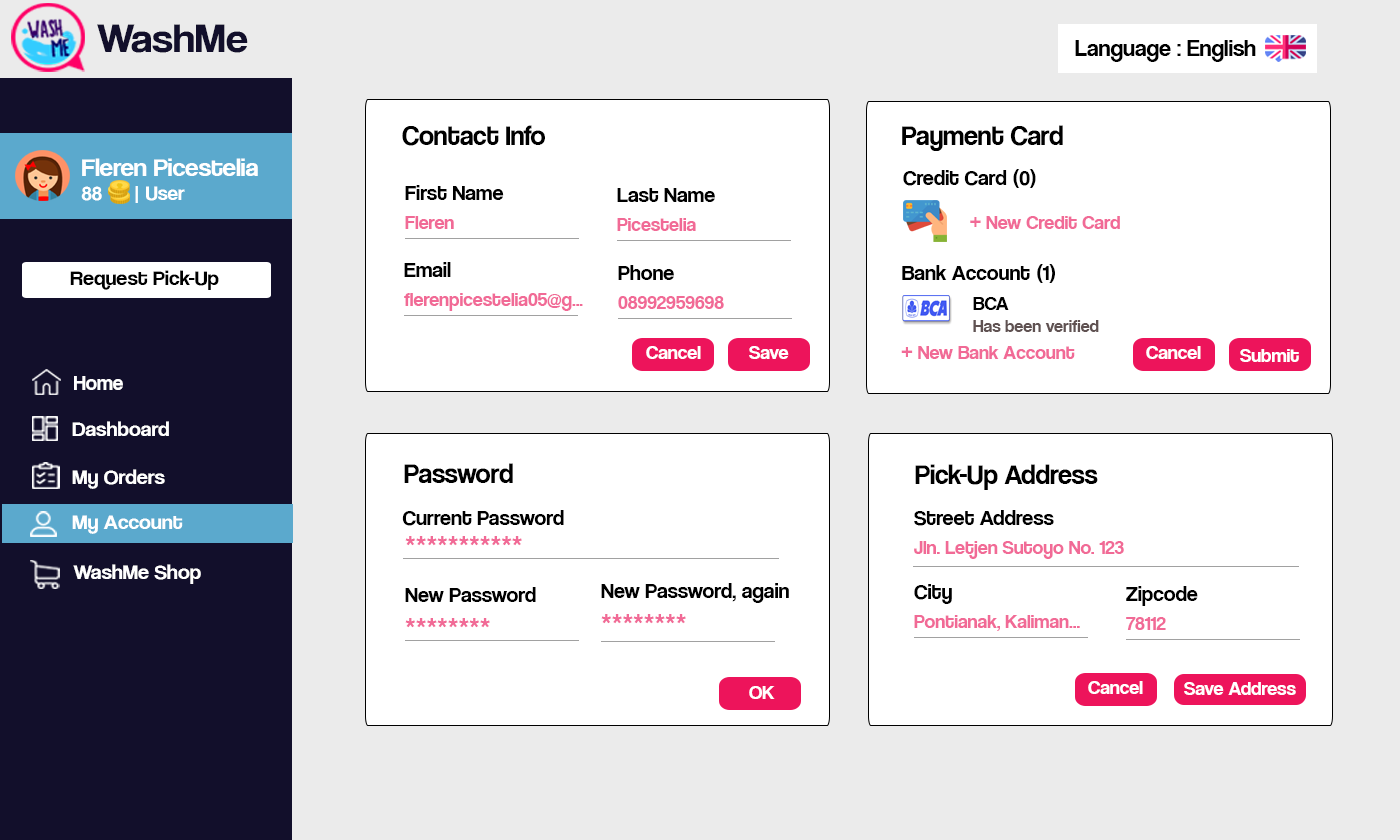
<style>
.page{position:relative;width:1400px;height:840px;background:#ffffff}
.page>*{position:absolute;margin:0}
.t1{font:42.1px "CoolveticaRg-Regular";color:#120f2b;scale:1.05 1}
.t2{font:24px "CoolveticaRg-Regular";color:#000000}
.t3{font:28.6px "CoolveticaRg-Regular";color:#000000;scale:0.97 1}
.t4{font:25.2px "CoolveticaRg-Regular";color:#ffffff;scale:1.05 1}
.t5{font:20px "CoolveticaRg-Regular";color:#ffffff;scale:1.05 1}
.t6{font:22px "CoolveticaRg-Regular";color:#000000}
.t7{font:20px "CoolveticaRg-Regular";color:#f16a96}
.t8{font:22px "CoolveticaRg-Regular";color:#f16a96}
.t9{font:21px "CoolveticaRg-Regular";color:#000000;scale:1.05 1}
.t10{font:18px "CoolveticaRg-Regular";color:#605252}
.t11{font:20px "CoolveticaRg-Regular";color:#000000}
.t12{font:20px "CoolveticaRg-Regular";color:#ffffff}
.t13{font:21px "CoolveticaRg-Regular";color:#ffffff}
.t14{font:21px "CoolveticaRg-Regular";color:#ffffff;scale:1.05 1}
</style>
<div class="page">
<p class="t1" style="left:97px;top:24px;width:151px;height:29px">WashMe</p>
<p class="t2" style="left:1075px;top:40px;width:181px;height:22px">Language : English</p>
<p class="t3" style="left:402px;top:125px;width:143px;height:21px">Contact Info</p>
<p class="t3" style="left:902px;top:125px;width:161px;height:26px">Payment Card</p>
<p class="t4" style="left:81px;top:158px;width:177px;height:45px">Fleren Picestelia<br><span class="t5">88      | User</span></p>
<p class="t6" style="left:903px;top:169px;width:133px;height:19px">Credit Card (0)</p>
<p class="t6" style="left:405px;top:185px;width:99px;height:15px">First Name</p>
<p class="t6" style="left:617px;top:188px;width:98px;height:14px">Last Name</p>
<p class="t7" style="left:405px;top:216px;width:49px;height:13px">Fleren</p>
<p class="t7" style="left:617px;top:218px;width:79px;height:13px">Picestelia</p>
<p class="t7" style="left:970px;top:216px;width:150px;height:13px"><span class="t8">+</span> New Credit Card</p>
<p class="t9" style="left:70px;top:270px;width:149px;height:20px">Request Pick-Up</p>
<p class="t6" style="left:404px;top:262px;width:47px;height:15px">Email</p>
<p class="t6" style="left:618px;top:265px;width:56px;height:15px">Phone</p>
<p class="t6" style="left:902px;top:264px;width:153px;height:19px">Bank Account (1)</p>
<p class="t7" style="left:404px;top:293px;width:179px;height:18px">flerenpicestelia05@g...</p>
<p class="t7" style="left:618px;top:296px;width:106px;height:13px">08992959698</p>
<p class="t10" style="left:973px;top:297px;width:126px;height:35px"><span class="t11">BCA<br></span>Has been verified</p>
<p class="t12" style="left:646px;top:346px;width:55px;height:13px">Cancel</p>
<p class="t12" style="left:749px;top:346px;width:40px;height:13px">Save</p>
<p class="t7" style="left:901px;top:346px;width:174px;height:13px"><span class="t8">+</span> New Bank Account</p>
<p class="t12" style="left:1146px;top:346px;width:55px;height:13px">Cancel</p>
<p class="t12" style="left:1240px;top:349px;width:59px;height:13px">Submit</p>
<p class="t13" style="left:74px;top:376px;width:49px;height:14px">Home</p>
<p class="t14" style="left:72px;top:421px;width:97px;height:15px">Dashboard</p>
<p class="t14" style="left:72px;top:469px;width:93px;height:20px">My Orders</p>
<p class="t3" style="left:404px;top:463px;width:109px;height:20px">Password</p>
<p class="t3" style="left:915px;top:464px;width:183px;height:26px">Pick-Up Address</p>
<p class="t6" style="left:402px;top:510px;width:162px;height:16px">Current Password</p>
<p class="t6" style="left:914px;top:510px;width:140px;height:16px">Street Address</p>
<p class="t14" style="left:72px;top:515px;width:111px;height:19px">My Account</p>
<p class="t7" style="left:405px;top:536px;width:117px;height:10px">***********</p>
<p class="t7" style="left:914px;top:541px;width:210px;height:18px">Jln. Letjen Sutoyo No. 123</p>
<p class="t14" style="left:73px;top:564px;width:128px;height:20px">WashMe Shop</p>
<p class="t6" style="left:405px;top:587px;width:131px;height:15px">New Password</p>
<p class="t6" style="left:601px;top:583px;width:188px;height:20px">New Password, again</p>
<p class="t6" style="left:914px;top:584px;width:38px;height:20px">City</p>
<p class="t6" style="left:1126px;top:586px;width:72px;height:20px">Zipcode</p>
<p class="t7" style="left:601px;top:614px;width:85px;height:10px">********</p>
<p class="t7" style="left:914px;top:615px;width:166px;height:16px">Pontianak, Kaliman...</p>
<p class="t7" style="left:1126px;top:617px;width:40px;height:13px">78112</p>
<p class="t7" style="left:405px;top:618px;width:85px;height:10px">********</p>
<p class="t12" style="left:749px;top:686px;width:26px;height:13px">OK</p>
<p class="t12" style="left:1088px;top:681px;width:55px;height:13px">Cancel</p>
<p class="t12" style="left:1184px;top:682px;width:112px;height:13px">Save Address</p>
</div>
